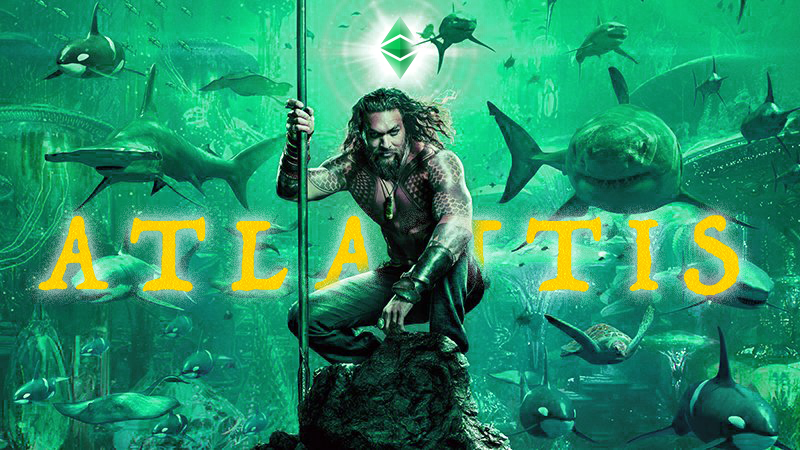
<style>
.page{position:relative;width:800px;height:450px}
.page>*{position:absolute;margin:0}
.t1{font:124.1px "Trattatello";letter-spacing:0.2em;color:#fde307;scale:0.94 1}
</style>
<div class="page">
<p class="t1" style="left:38px;top:215px;width:702px;height:81px">ATLANTIS</p>
</div>
